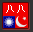
<style>
.page{position:relative;width:33px;height:32px;background:#f20000}
.page>*{position:absolute;margin:0}
.t1{font:10.4px "SimSun";color:#ffffff}
</style>
<div class="page">
<p class="t1" style="left:6px;top:5px;width:19px;height:8px">八八</p>
</div>
